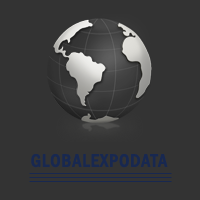
<style>
.page{position:relative;width:200px;height:200px;background:#333333}
.page>*{position:absolute;margin:0}
.t1{font:18.2px "FranklinGothic-MediumCond";letter-spacing:0.03em;color:#182850;font-weight:bold}
</style>
<div class="page">
<p class="t1" style="left:31px;top:154px;width:137px;height:14px">GLOBALEXPODATA</p>
</div>
